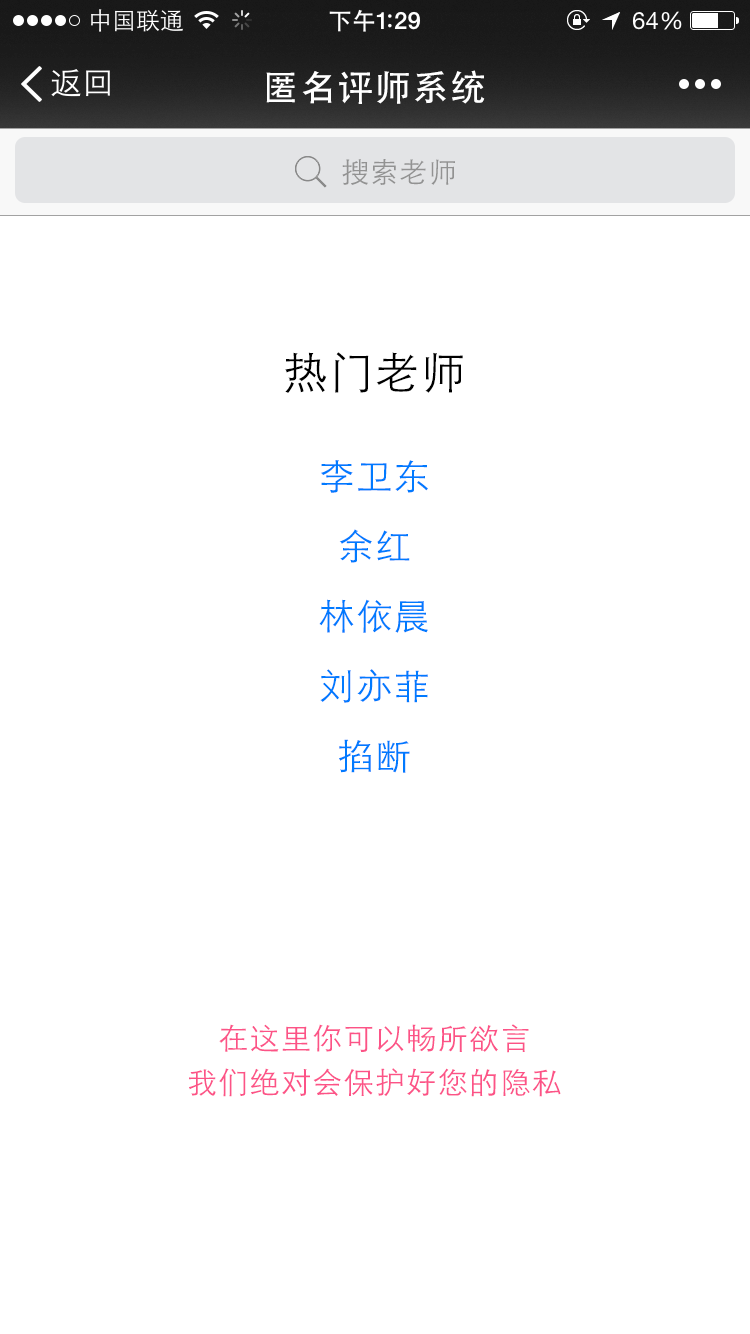
<style>
.page{position:relative;width:750px;height:1334px;background:#ffffff}
.page>*{position:absolute;margin:0}
.t1{font:36px "STHeiti";letter-spacing:0.045em;color:#ffffff}
.t2{font:28px "STXihei";letter-spacing:0.045em;color:#929292}
.t3{font:44px "STXihei";letter-spacing:0.045em;color:#000000}
.t4{font:36px "STXihei";letter-spacing:0.045em;color:#007aff}
.t5{font:30px/11px "STXihei";letter-spacing:0.045em;color:#fc5387}
</style>
<div class="page">
<p class="t1" style="left:266px;top:70px;width:219px;height:34px">匿名评师系统</p>
<p class="t2" style="left:342px;top:159px;width:113px;height:26px">搜索老师</p>
<p class="t3" style="left:285px;top:352px;width:178px;height:41px">热门老师</p>
<p class="t4" style="left:321px;top:460px;width:107px;height:33px">李卫东</p>
<p class="t4" style="left:339px;top:529px;width:71px;height:34px">余红</p>
<p class="t4" style="left:319px;top:599px;width:109px;height:34px">林依晨</p>
<p class="t4" style="left:320px;top:669px;width:108px;height:34px">刘亦菲</p>
<p class="t4" style="left:339px;top:739px;width:71px;height:34px">掐断</p>
<p class="t5" style="left:189px;top:1024px;width:372px;height:73px;text-align:center">在这里你可以畅所欲言<br><br><br><br>我们绝对会保护好您的隐私</p>
</div>
